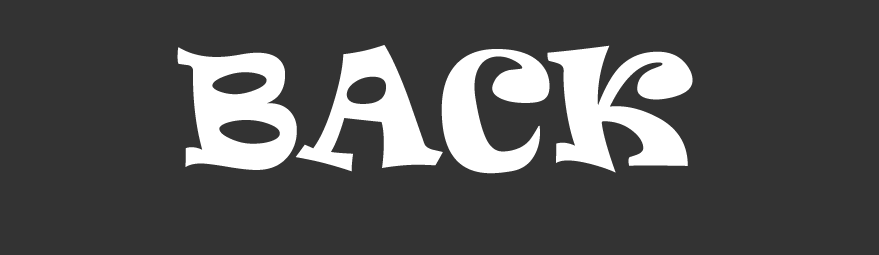
<style>
.page{position:relative;width:879px;height:255px;background:#333333}
.page>*{position:absolute;margin:0}
.t1{font:150px "Ravie";color:#ffffff;text-transform:uppercase}
</style>
<div class="page">
<p class="t1" style="left:177px;top:45px;width:516px;height:129px">Back</p>
</div>
